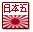
<style>
.page{position:relative;width:33px;height:32px;background:#ffffff}
.page>*{position:absolute;margin:0}
.t1{font:10.4px "SimSun";letter-spacing:-0.25em;color:#ae0012}
</style>
<div class="page">
<p class="t1" style="left:4px;top:4px;width:23px;height:9px">日本五</p>
</div>
